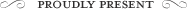
<style>
.page{position:relative;width:187px;height:9px;background:#ffffff}
.page>*{position:absolute;margin:0}
.t1{font:24px "Nymphette";letter-spacing:-0.05em}
.t2{font:21px "MrsEavesPetiteCaps";letter-spacing:-0.05em;color:#2e2c2c}
</style>
<div class="page">
<p class="t1" style="left:0px;top:0px;width:25px;height:9px;rotate:-21deg">K</p>
<p class="t2" style="left:37px;top:0px;width:117px;height:9px">proudly present</p>
<p class="t1" style="left:162px;top:0px;width:25px;height:9px;rotate:-159deg">K</p>
</div>
